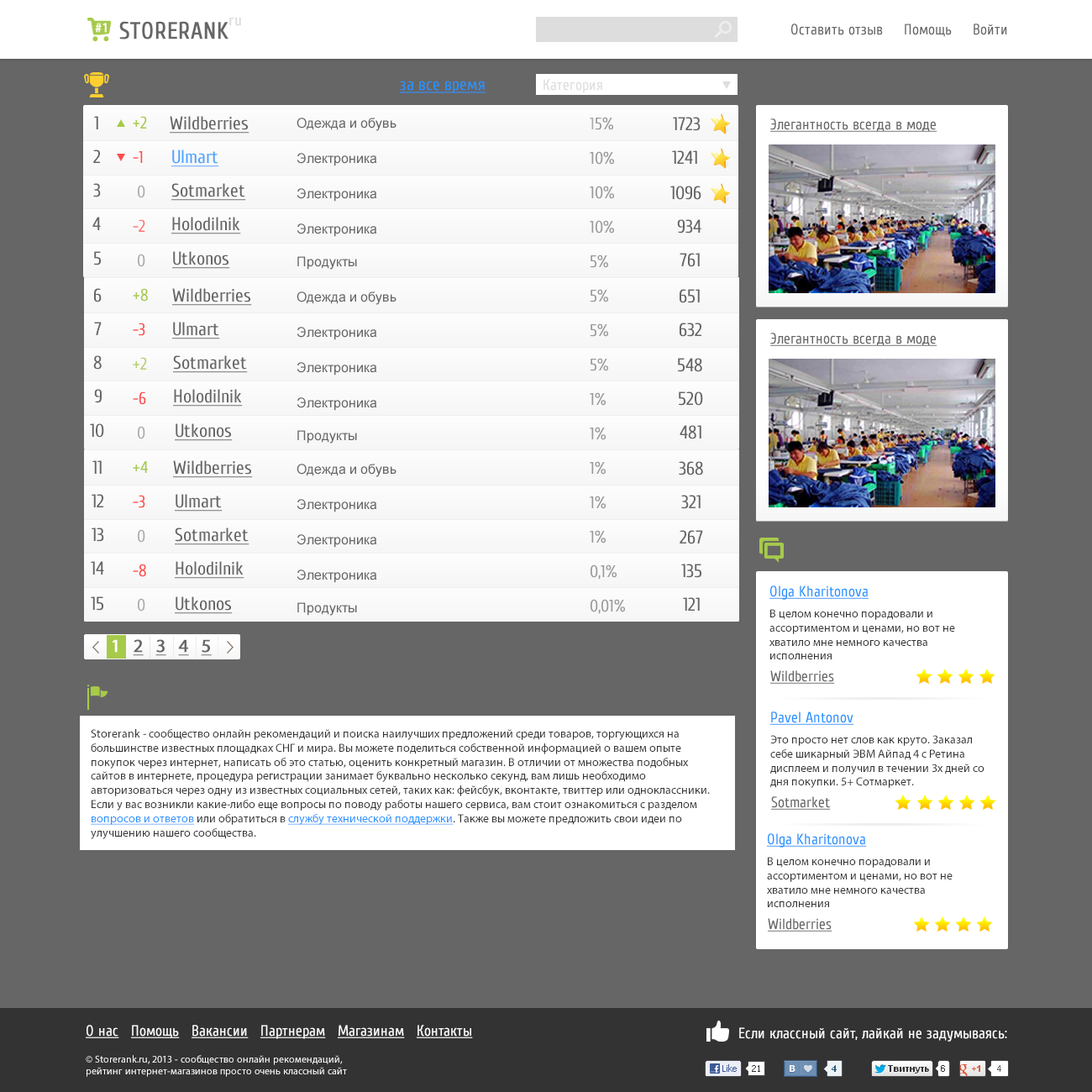
<style>
.page{position:relative;width:1092px;height:1092px;background:#666666}
.page>*{position:absolute;margin:0}
.t1{font:23.5px "Cuprum-Regular";color:#666666;font-weight:bold}
.t2{font:15.1px "Cuprum-Regular";color:#dddddd;font-weight:bold}
.t3{font:13.4px "MyriadPro-Regular";color:#ffffff;font-weight:bold}
.t4{font:15.1px "Cuprum-Regular";color:#666666}
.t5{font:16.8px "Cuprum-Regular";color:#666666}
.t6{font:16.8px "Cuprum-Regular";color:#666666;text-decoration:underline}
.t7{font:16.8px "Cuprum-Regular";color:#2692ff;text-decoration:underline}
.t8{font:15.1px "Cuprum-Regular";color:#dddddd}
.t9{font:18.5px "Cuprum-Regular";color:#666666;text-decoration:underline}
.t10{font:18.5px "Cuprum-Regular";color:#666666}
.t11{font:16.8px/34.4px "Cuprum-Regular";color:#a6ca4a}
.t12{font:16.8px/34.4px "Cuprum-Regular";color:#ff4c4c}
.t13{font:16.8px/34.4px "Cuprum-Regular";color:#aaaaaa}
.t14{font:16.8px/34.4px "Cuprum-Regular";color:#ff7272}
.t15{font:16.8px/34.4px "Cuprum-Regular";color:#b4d06d}
.t16{font:13.4px "ArialMT";color:#666666}
.t17{font:16.8px/34.4px "Cuprum-Regular";color:#999999}
.t18{font:15.1px "Cuprum-Regular";color:#666666;text-decoration:underline}
.t19{font:18.5px "Cuprum-Regular";color:#4ca5ff;text-decoration:underline}
.t20{font:15.1px "Cuprum-Regular";color:#2693ff;text-decoration:underline}
.t21{font:11.8px/14.1px "MyriadPro-Regular";color:#333333}
.t22{font:18.5px "MyriadPro-Regular";color:#666666;font-weight:bold;text-decoration:underline}
.t23{font:18.5px "MyriadPro-Regular";color:#666666;font-weight:bold}
.t24{font:18.5px "MyriadPro-Regular";color:#ffffff;font-weight:bold}
.t25{font:11.8px/14.1px "MyriadPro-Regular";color:#2692ff;text-decoration:underline}
.t26{font:15.1px "Cuprum-Regular";color:#ffffff;text-decoration:underline}
.t27{font:15.1px "Cuprum-Regular";color:#ffffff}
.t28{font:10.1px/12.1px "MyriadPro-Regular";color:#ffffff}
</style>
<div class="page">
<p class="t1" style="left:119px;top:18px;width:122px;height:21px">STORERANK<span class="t2">ru</span></p>
<p class="t3" style="left:95px;top:23px;width:12px;height:10px">#1</p>
<p class="t4" style="left:791px;top:24px;width:216px;height:13px">Оставить отзыв     Помощь     Войти</p>
<p class="t5" style="left:121px;top:77px;width:365px;height:16px">Рейтинг интернет-магазинов: <span class="t6">за неделю</span> / <span class="t7">за все время</span></p>
<p class="t8" style="left:543px;top:79px;width:59px;height:14px">Категория</p>
<p class="t9" style="left:94px;top:116px;width:155px;height:18px"><span class="t10">1              </span>Wildberries</p>
<p class="t11" style="left:133px;top:116px;width:15px;height:496px">+2<br><span class="t12">-1<br> </span><span class="t13">0<br></span><span class="t14">-2<br> </span><span class="t13">0<br></span>+8<br><span class="t12">-3<br></span><span class="t15">+2<br></span><span class="t12">-6<br> </span><span class="t13">0<br></span>+4<br><span class="t12">-3<br></span><span class="t13"> 0<br></span><span class="t12">-8<br> </span><span class="t13">0</span></p>
<p class="t16" style="left:297px;top:118px;width:99px;height:13px">Одежда и обувь</p>
<p class="t17" style="left:590px;top:117px;width:35px;height:497px"><span class="t13">1</span>5%<br>10%<br>10%<br>10%<br>5%<br>5%<br>5%<br>5%<br>1%<br>1%<br>1%<br>1%<br>1%<br>0,1%<br>0,01%</p>
<p class="t10" style="left:673px;top:117px;width:28px;height:14px">1723</p>
<p class="t18" style="left:770px;top:118px;width:167px;height:14px">Элегантность всегда в моде</p>
<p class="t19" style="left:93px;top:150px;width:126px;height:17px"><span class="t10">2              </span>Ulmart</p>
<p class="t16" style="left:297px;top:153px;width:80px;height:13px">Электроника</p>
<p class="t10" style="left:672px;top:150px;width:25px;height:14px">1241</p>
<p class="t9" style="left:93px;top:183px;width:153px;height:18px"><span class="t10">3              </span>Sotmarket</p>
<p class="t10" style="left:670px;top:186px;width:31px;height:14px">1096</p>
<p class="t16" style="left:297px;top:188px;width:80px;height:14px">Электроника</p>
<p class="t9" style="left:92px;top:217px;width:149px;height:17px"><span class="t10">4              </span>Holodilnik</p>
<p class="t10" style="left:677px;top:219px;width:24px;height:15px">934</p>
<p class="t16" style="left:297px;top:223px;width:80px;height:14px">Электроника</p>
<p class="t9" style="left:94px;top:251px;width:136px;height:18px"><span class="t10">5              </span>Utkonos</p>
<p class="t16" style="left:297px;top:256px;width:60px;height:14px">Продукты</p>
<p class="t10" style="left:680px;top:253px;width:20px;height:14px">761</p>
<p class="t9" style="left:94px;top:288px;width:158px;height:18px"><span class="t10">6              </span>Wildberries</p>
<p class="t16" style="left:297px;top:291px;width:99px;height:14px">Одежда и обувь</p>
<p class="t10" style="left:680px;top:289px;width:20px;height:14px">651</p>
<p class="t9" style="left:94px;top:322px;width:126px;height:17px"><span class="t10">7              </span>Ulmart</p>
<p class="t16" style="left:297px;top:327px;width:80px;height:13px">Электроника</p>
<p class="t10" style="left:680px;top:323px;width:21px;height:14px">632</p>
<p class="t18" style="left:770px;top:333px;width:167px;height:13px">Элегантность всегда в моде</p>
<p class="t9" style="left:93px;top:355px;width:155px;height:18px"><span class="t10">8              </span>Sotmarket</p>
<p class="t16" style="left:297px;top:362px;width:80px;height:13px">Электроника</p>
<p class="t10" style="left:678px;top:358px;width:24px;height:14px">548</p>
<p class="t9" style="left:94px;top:389px;width:149px;height:18px"><span class="t10">9              </span>Holodilnik</p>
<p class="t16" style="left:297px;top:397px;width:80px;height:14px">Электроника</p>
<p class="t10" style="left:679px;top:391px;width:24px;height:15px">520</p>
<p class="t9" style="left:90px;top:423px;width:143px;height:18px"><span class="t10">10              </span>Utkonos</p>
<p class="t10" style="left:680px;top:425px;width:21px;height:14px">481</p>
<p class="t16" style="left:297px;top:430px;width:60px;height:14px">Продукты</p>
<p class="t9" style="left:92px;top:460px;width:161px;height:18px"><span class="t10">11              </span>Wildberries</p>
<p class="t10" style="left:679px;top:461px;width:24px;height:14px">368</p>
<p class="t16" style="left:297px;top:464px;width:99px;height:13px">Одежда и обувь</p>
<p class="t9" style="left:92px;top:494px;width:131px;height:18px"><span class="t10">12              </span>Ulmart</p>
<p class="t10" style="left:681px;top:495px;width:20px;height:14px">321</p>
<p class="t16" style="left:297px;top:499px;width:80px;height:13px">Электроника</p>
<p class="t9" style="left:92px;top:528px;width:157px;height:17px"><span class="t10">13              </span>Sotmarket</p>
<p class="t10" style="left:680px;top:530px;width:23px;height:14px">267</p>
<p class="t16" style="left:297px;top:534px;width:80px;height:14px">Электроника</p>
<p class="t9" style="left:91px;top:561px;width:153px;height:18px"><span class="t10">14              </span>Holodilnik</p>
<p class="t16" style="left:297px;top:570px;width:80px;height:13px">Электроника</p>
<p class="t10" style="left:681px;top:564px;width:20px;height:14px">135</p>
<p class="t20" style="left:769px;top:585px;width:100px;height:15px">Olga Kharitonova</p>
<p class="t9" style="left:91px;top:596px;width:142px;height:18px"><span class="t10">15              </span>Utkonos</p>
<p class="t16" style="left:297px;top:602px;width:60px;height:14px">Продукты</p>
<p class="t10" style="left:683px;top:597px;width:17px;height:14px">121</p>
<p class="t21" style="left:769px;top:609px;width:186px;height:50px">В целом конечно порадовали и ассортиментом и ценами, но вот не хватило мне немного качества исполнения</p>
<p class="t22" style="left:113px;top:639px;width:99px;height:17px"><span class="t23">   </span><span class="t24">1   </span>2   3   4   5</p>
<p class="t18" style="left:770px;top:670px;width:65px;height:14px">Wildberries</p>
<p class="t20" style="left:770px;top:711px;width:84px;height:14px">Pavel Antonov</p>
<p class="t21" style="left:91px;top:729px;width:619px;height:110px">Storerank - сообщество онлайн рекомендаций и поиска наилучших предложений среди товаров, торгующихся на большинстве известных площадках СНГ и мира. Вы можете поделиться собственной информацией о вашем опыте покупок через интернет, написать об это статью, оценить конкретный магазин. В отличии от множества подобных сайтов в интернете, процедура регистрации занимает буквально несколько секунд, вам лишь необходимо авторизоваться через одну из известных социальных сетей, таких как: фейсбук, вконтакте, твиттер или одноклассники. Если у вас возникли какие-либо еще вопросы по поводу работы нашего сервиса, вам стоит ознакомиться с разделом <span class="t25">вопросов и ответов</span> или обратиться в <span class="t25">службу технической поддержки</span>. Также вы можете предложить свои идеи по улучшению нашего сообщества.</p>
<p class="t21" style="left:770px;top:735px;width:214px;height:53px">Это просто нет слов как круто. Заказал себе шикарный ЭВМ Айпад 4 с Ретина дисплеем и получил в течении 3х дней со дня покупки. 5+ Сотмаркет.</p>
<p class="t18" style="left:771px;top:796px;width:60px;height:14px">Sotmarket</p>
<p class="t20" style="left:767px;top:833px;width:100px;height:15px">Olga Kharitonova</p>
<p class="t21" style="left:767px;top:857px;width:186px;height:50px">В целом конечно порадовали и ассортиментом и ценами, но вот не хватило мне немного качества исполнения</p>
<p class="t18" style="left:768px;top:918px;width:64px;height:14px">Wildberries</p>
<p class="t26" style="left:86px;top:1025px;width:387px;height:14px">О нас   Помощь   Вакансии   Партнерам   Магазинам   Контакты</p>
<p class="t27" style="left:739px;top:1027px;width:268px;height:15px">Если классный сайт, лайкай не задумываясь:</p>
<p class="t28" style="left:86px;top:1055px;width:261px;height:22px">© Storerank.ru, 2013 - сообщество онлайн рекомендаций, рейтинг интернет-магазинов просто очень классный сайт</p>
</div>
